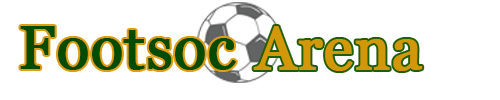
<style>
.page{position:relative;width:500px;height:100px;background:#ffffff}
.page>*{position:absolute;margin:0}
.t1{font:60px "Vani";color:#064b02;font-weight:bold}
.t2{font:60px "Vani";color:#d39809;font-weight:bold}
</style>
<div class="page">
<p class="t1" style="left:20px;top:26px;width:216px;height:44px">Footsoc</p>
<p class="t2" style="left:253px;top:26px;width:170px;height:45px">Arena</p>
</div>
